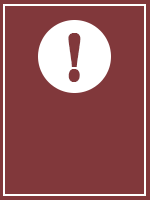
<style>
.page{position:relative;width:150px;height:200px;background:#81383b}
.page>*{position:absolute;margin:0}
.t1{font:58px "BernardMT-Condensed";color:#81383b;font-weight:bold}
</style>
<div class="page">
<p class="t1" style="left:68px;top:33px;width:13px;height:49px">!</p>
</div>
